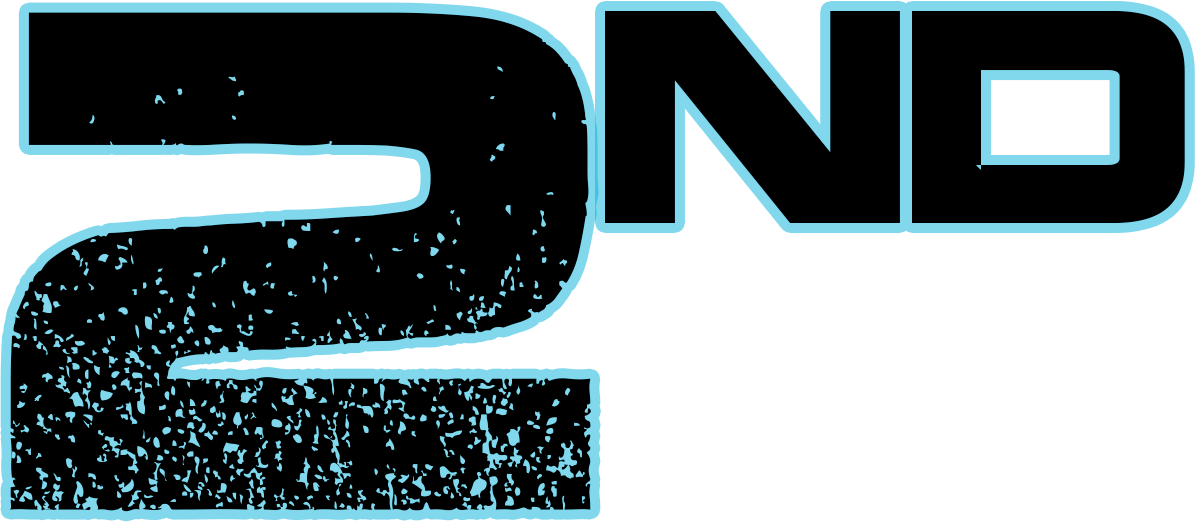
<style>
.page{position:relative;width:1195px;height:522px;background:#000000}
.page>*{position:absolute;margin:0}
.t1{font:700px "Coalition";color:#000000}
.t2{font:300px "Coalition";color:#000000}
</style>
<div class="page">
<p class="t1" style="left:10px;top:12px;width:581px;height:500px">2</p>
<p class="t2" style="left:605px;top:11px;width:580px;height:212px">nd</p>
</div>
